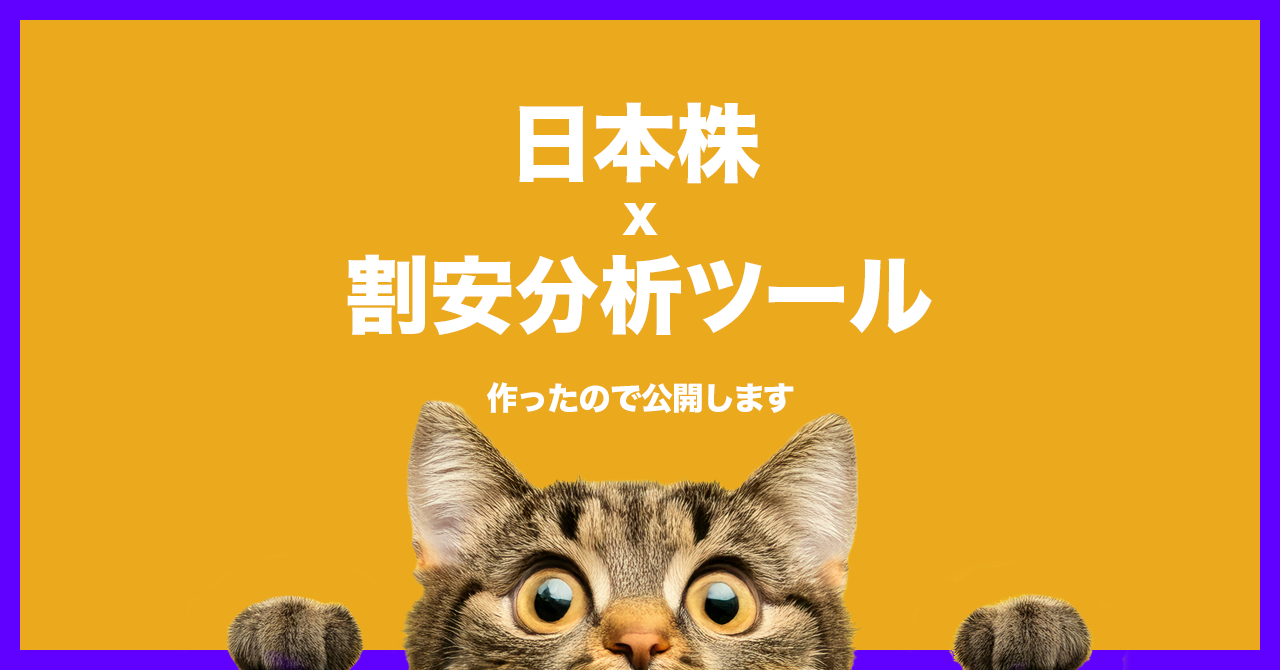
<style>
.page{position:relative;width:1280px;height:670px;background:#ebaa1e}
.page>*{position:absolute;margin:0}
.t1{font:84.7px "HiraKakuStd-W8";color:#ffffff}
.t2{font:51.1px "HiraKakuStd-W8";color:#ffffff}
.t3{font:31.9px "HiraKakuStd-W8";color:#ffffff}
</style>
<div class="page">
<p class="t1" style="left:519px;top:102px;width:241px;height:82px">日本株</p>
<p class="t2" style="left:622px;top:203px;width:36px;height:32px">x</p>
<p class="t1" style="left:347px;top:254px;width:585px;height:82px">割安分析ツール</p>
<p class="t3" style="left:487px;top:382px;width:307px;height:31px">作ったので公開します</p>
</div>
